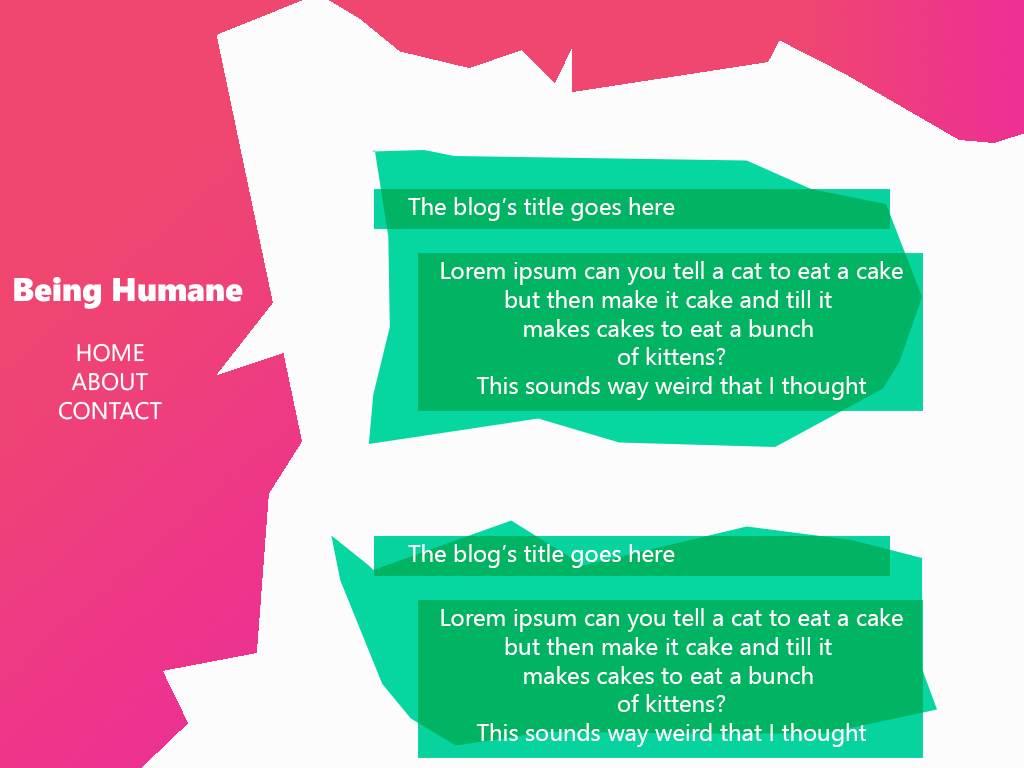
<style>
.page{position:relative;width:1024px;height:768px;background:#fcfcfc}
.page>*{position:absolute;margin:0}
.t1{font:24px "SegoeUI";color:#ffffff}
.t2{font:32.7px "SegoeUIBlack";color:#ffffff}
</style>
<div class="page">
<p class="t1" style="left:408px;top:197px;width:267px;height:24px">The blog’s title goes here</p>
<p class="t1" style="left:441px;top:261px;width:462px;height:139px;text-align:center">Lorem ipsum can you tell a cat to eat a cake<br>but then make it cake and till it <br>makes cakes to eat a bunch <br>of kittens?<br>This sounds way weird that I thought</p>
<p class="t2" style="left:14px;top:277px;width:229px;height:32px">Being Humane</p>
<p class="t1" style="left:59px;top:343px;width:103px;height:77px;text-align:center">HOME<br>ABOUT<br>CONTACT</p>
<p class="t1" style="left:408px;top:544px;width:267px;height:24px">The blog’s title goes here</p>
<p class="t1" style="left:441px;top:608px;width:462px;height:139px;text-align:center">Lorem ipsum can you tell a cat to eat a cake<br>but then make it cake and till it <br>makes cakes to eat a bunch <br>of kittens?<br>This sounds way weird that I thought</p>
</div>
